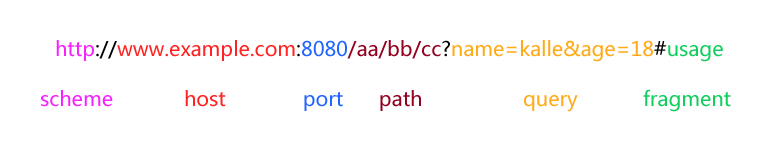
<style>
.page{position:relative;width:780px;height:150px;background:#ffffff}
.page>*{position:absolute;margin:0}
.t1{font:20px "MicrosoftYaHei";color:#ffaa16}
.t2{font:20px "MicrosoftYaHei";color:#f723ff}
.t3{font:20px "MicrosoftYaHei";color:#010101}
.t4{font:20px "MicrosoftYaHei";color:#ff2323}
.t5{font:20px "MicrosoftYaHei";color:#2266ff}
.t6{font:20px "MicrosoftYaHei";color:#920220}
.t7{font:20px "MicrosoftYaHei";color:#13cd5e}
</style>
<div class="page">
<p class="t1" style="left:56px;top:40px;width:667px;height:22px"><span class="t2">http</span><span class="t3">://</span><span class="t4">www.example.com</span><span class="t3">:</span><span class="t5">8080</span><span class="t6">/aa/bb/cc</span><span class="t3">?</span>name=kalle&amp;age=18<span class="t3">#</span><span class="t7">usage</span></p>
<p class="t7" style="left:41px;top:89px;width:690px;height:23px"><span class="t2">scheme            </span><span class="t4">host             </span><span class="t5">port      </span><span class="t6">path                 </span><span class="t1">query           </span>fragment</p>
</div>
